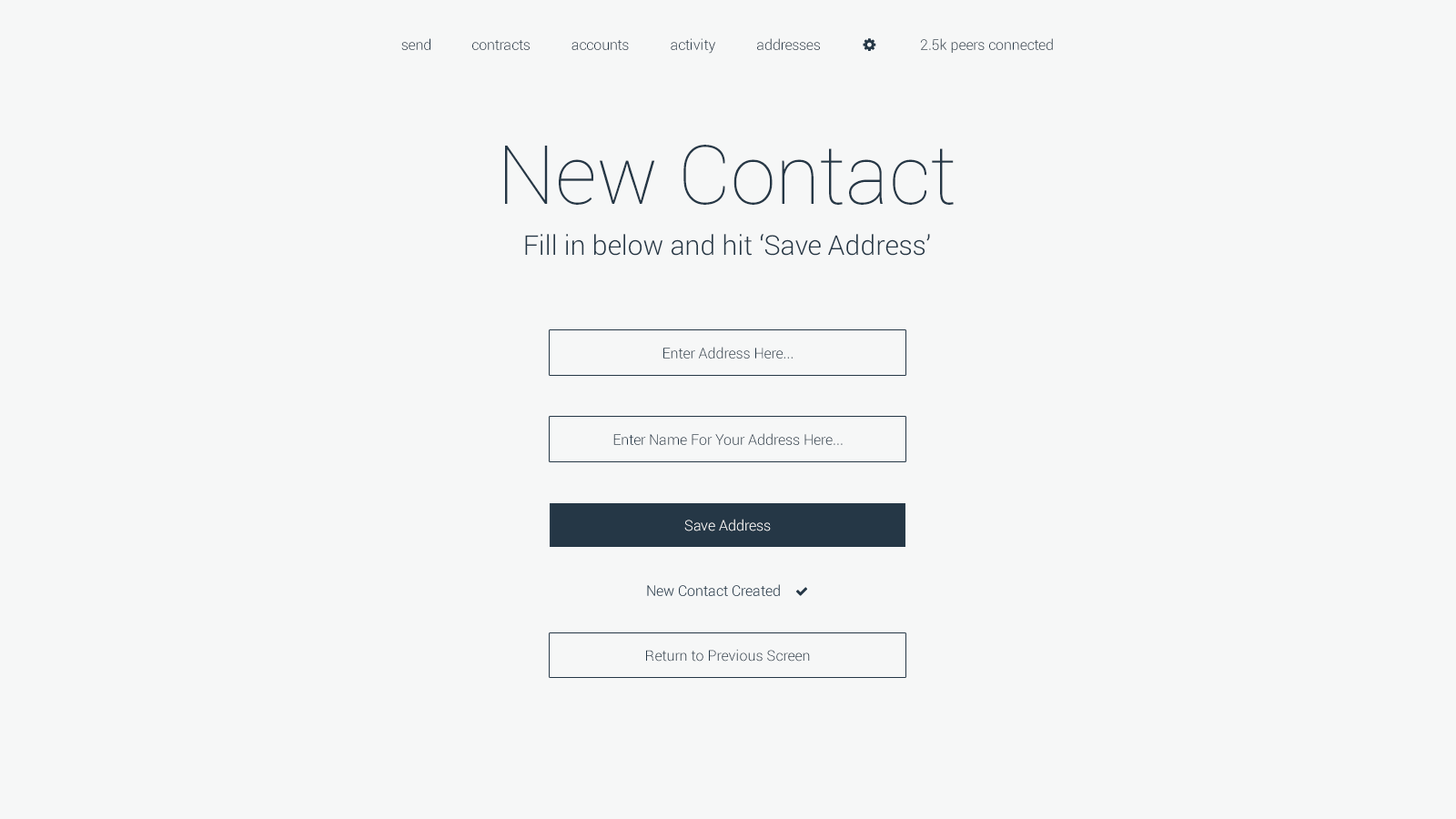
<style>
.page{position:relative;width:1456px;height:819px;background:#f6f7f7}
.page>*{position:absolute;margin:0}
.t1{font:14.6px "Roboto-Light";color:#253746}
.t2{font:81.9px "Roboto-Thin";color:#253746}
.t3{font:27.3px "Roboto-Light";color:#253746}
.t4{font:14.6px "Roboto-Light";color:#ffffff}
</style>
<div class="page">
<p class="t1" style="left:401px;top:38px;width:29px;height:12px">send</p>
<p class="t1" style="left:472px;top:40px;width:58px;height:10px">contracts</p>
<p class="t1" style="left:571px;top:40px;width:58px;height:10px">accounts</p>
<p class="t1" style="left:671px;top:38px;width:44px;height:16px">activity</p>
<p class="t1" style="left:757px;top:38px;width:63px;height:12px">addresses</p>
<p class="t1" style="left:920px;top:38px;width:133px;height:15px">2.5k peers connected</p>
<p class="t2" style="left:505px;top:145px;width:449px;height:60px">New Contact</p>
<p class="t3" style="left:525px;top:234px;width:405px;height:22px">Fill in below and hit ‘Save Address’</p>
<p class="t1" style="left:663px;top:347px;width:130px;height:12px">Enter Address Here...</p>
<p class="t1" style="left:613px;top:433px;width:230px;height:12px">Enter Name For Your Address Here...</p>
<p class="t4" style="left:684px;top:519px;width:87px;height:12px">Save Address</p>
<p class="t1" style="left:646px;top:649px;width:164px;height:13px">Return to Previous Screen</p>
</div>
